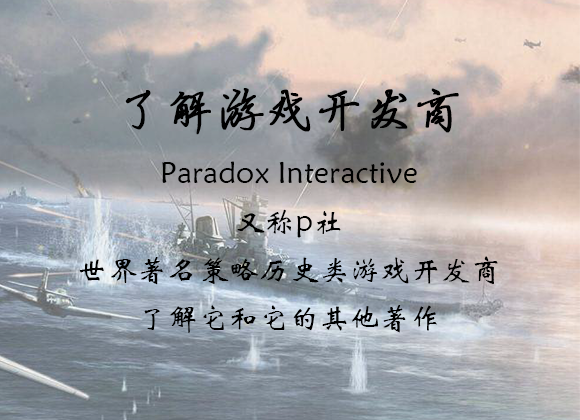
<style>
.page{position:relative;width:580px;height:420px}
.page>*{position:absolute;margin:0}
.t1{font:30px/48px "STXinwei";letter-spacing:0.01em;color:#000000}
.t2{font:48px/72px "FZYBXSJW--GB1-0";letter-spacing:0.01em;color:#000000;font-weight:bold}
</style>
<div class="page">
<p class="t1" style="left:79px;top:88px;width:419px;height:245px;text-align:center"><span class="t2">了解游戏开发商<br></span>Paradox Interactive<br>又称p社<br>世界著名策略历史类游戏开发商<br>了解它和它的其他著作</p>
</div>
